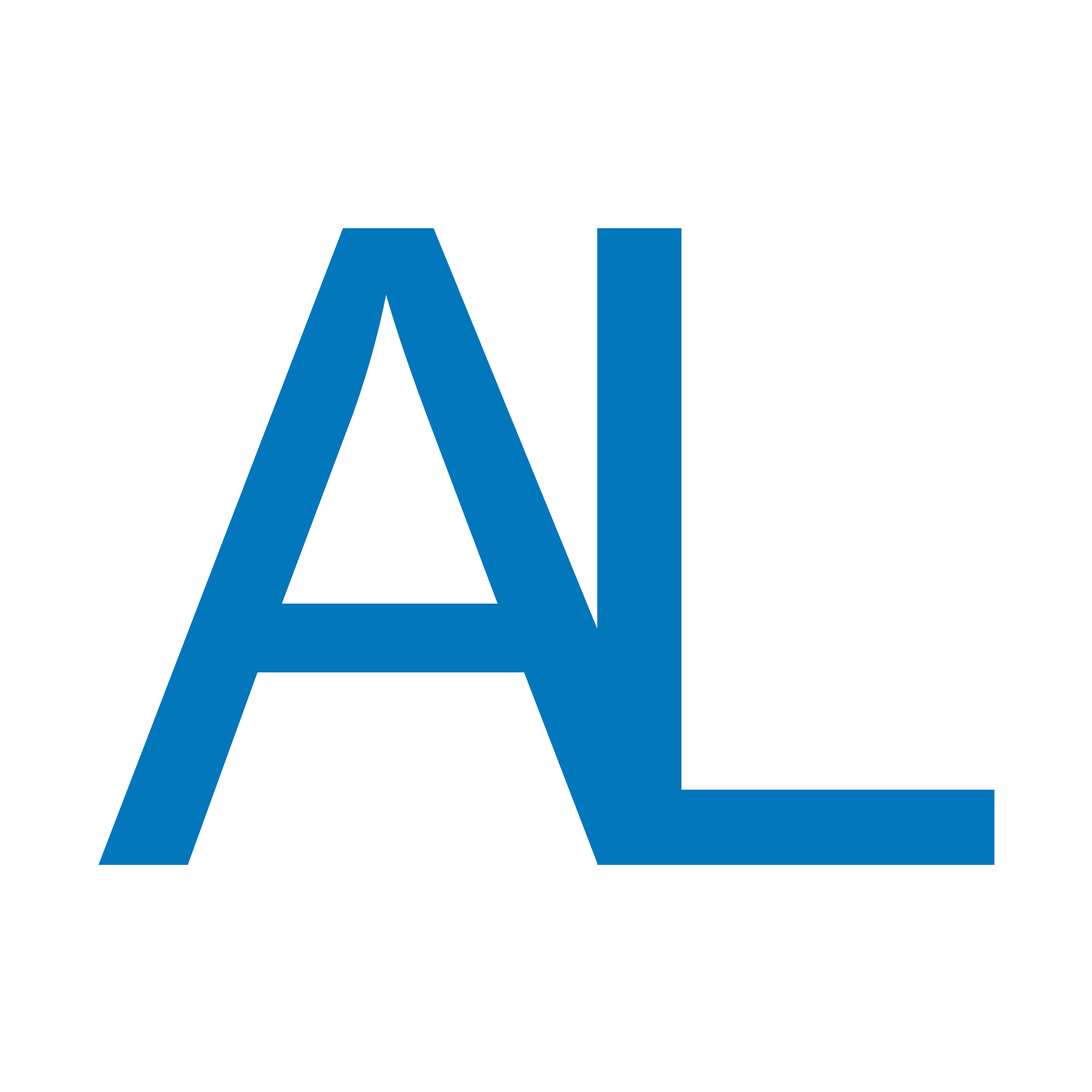
<style>
.page{position:relative;width:1092px;height:1092px;background:#ffffff}
.page>*{position:absolute;margin:0}
.t1{font:888.7px "ArialMT";letter-spacing:-0.18em;color:#0277bc}
</style>
<div class="page">
<p class="t1" style="left:98px;top:228px;width:896px;height:637px">AL</p>
</div>
